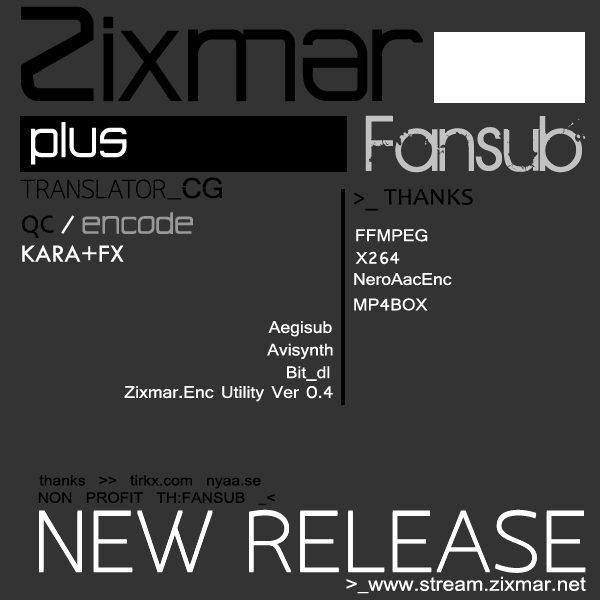
<style>
.page{position:relative;width:600px;height:600px;background:#333333}
.page>*{position:absolute;margin:0}
.t1{font:105px "AdvancedArchitecture";color:#000000}
.t2{font:138.4px "AdvancedArchitecture";color:#000000}
.t3{font:43px "AdvancedArchitecture";color:#ffffff}
.t4{font:85.9px "BIRTHOFAHERO";color:#c2c2c2}
.t5{font:25.8px "Quark-Light";color:#000000}
.t6{font:32.3px "PLUGChic";color:#000000}
.t7{font:23.5px "Candara";color:#000000;scale:1.08 1}
.t8{font:25.8px "Candara";color:#000000}
.t9{font:25.8px "Shruti";color:#ffffff}
.t10{font:25.8px "AdvancedArchitecture";color:#989898}
.t11{font:17.7px "Shruti";color:#ffffff;scale:1.08 1}
.t12{font:25.8px "TwCenMT-Regular";color:#fefefe}
.t13{font:14.5px "DokChampa";color:#000000;scale:1.09 1}
.t14{font:86.8px "Quark-Light";color:#ffffff;scale:1.09 1}
.t15{font:82.5px "Quark-Light";color:#ffffff;scale:1.14 1}
.t16{font:19.3px "DokChampa";color:#ffffff;scale:1.09 1}
</style>
<div class="page">
<p class="t1" style="left:21px;top:6px;width:402px;height:96px"><span class="t2">Z</span>IXMAR</p>
<p class="t3" style="left:31px;top:122px;width:96px;height:43px">PLUs</p>
<p class="t4" style="left:365px;top:115px;width:221px;height:58px">Fansub</p>
<p class="t5" style="left:20px;top:179px;width:146px;height:20px">TRANSLATOR</p>
<p class="t6" style="left:167px;top:177px;width:55px;height:23px">_CG</p>
<p class="t7" style="left:353px;top:189px;width:120px;height:22px">&gt;_ THANKS</p>
<p class="t8" style="left:22px;top:215px;width:32px;height:23px">QC</p>
<p class="t9" style="left:61px;top:215px;width:14px;height:19px">/</p>
<p class="t10" style="left:82px;top:212px;width:111px;height:22px">ENCODE</p>
<p class="t11" style="left:356px;top:229px;width:72px;height:13px">FFMPEG</p>
<p class="t12" style="left:22px;top:244px;width:102px;height:18px">KARA+FX</p>
<p class="t11" style="left:355px;top:251px;width:45px;height:14px">X264</p>
<p class="t11" style="left:354px;top:273px;width:98px;height:13px">NeroAacEnc</p>
<p class="t11" style="left:354px;top:298px;width:74px;height:13px">MP4BOX</p>
<p class="t11" style="left:268px;top:321px;width:64px;height:16px">Aegisub</p>
<p class="t11" style="left:267px;top:343px;width:66px;height:16px">Avisynth</p>
<p class="t11" style="left:287px;top:366px;width:43px;height:15px">Bit_dl</p>
<p class="t11" style="left:124px;top:386px;width:209px;height:16px">Zixmar.Enc Utility Ver 0.4</p>
<p class="t13" style="left:39px;top:475px;width:222px;height:14px">thanks &gt;&gt; tirkx.com nyaa.se</p>
<p class="t13" style="left:38px;top:492px;width:237px;height:13px">NON PROFIT TH:FANSUB _&lt;</p>
<p class="t14" style="left:39px;top:509px;width:547px;height:64px">NEW RELEASE</p>
<p class="t15" style="left:39px;top:511px;width:547px;height:61px">NEW RELEASE</p>
<p class="t16" style="left:346px;top:576px;width:240px;height:18px">&gt;_www.stream.zixmar.net</p>
</div>
